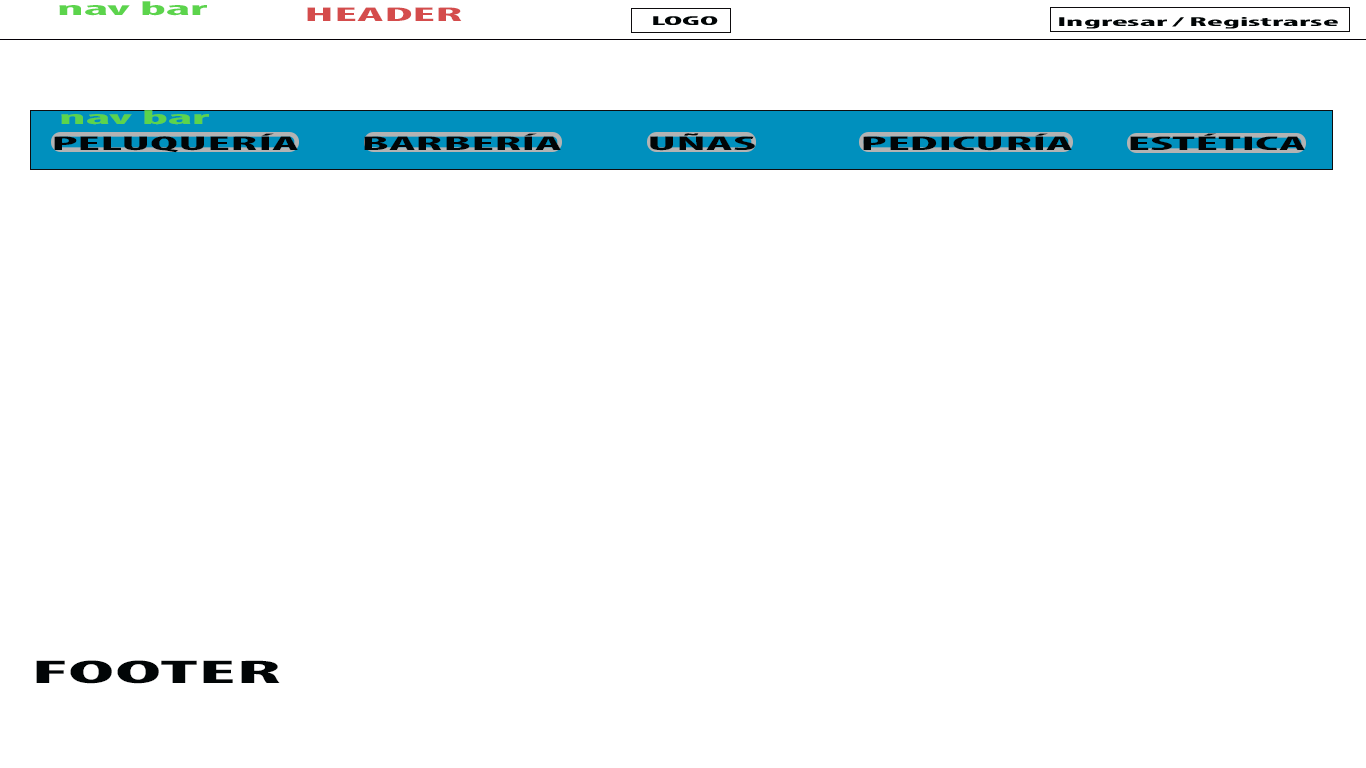
<style>
.page{position:relative;width:1366px;height:768px;background:#ffffff}
.page>*{position:absolute;margin:0}
.t1{font:20px "MyriadPro-BoldCond";color:#5cd44c;scale:2.91 1}
.t2{font:20px "MyriadPro-BoldCond";color:#d44c4c;scale:2.91 1}
.t3{font:20px "MyriadPro-BoldCond";color:#010506;scale:2.91 1}
.t4{font:33px "MyriadPro-BoldCond";color:#010506;scale:2.91 1}
</style>
<div class="page">
<p class="t1" style="left:59px;top:1px;width:148px;height:15px">nav bar</p>
<p class="t2" style="left:307px;top:7px;width:155px;height:14px">HEADER</p>
<p class="t1" style="left:61px;top:110px;width:148px;height:15px">nav bar</p>
<p class="t3" style="left:54px;top:133px;width:244px;height:20px">PELUQUERÍA</p>
<p class="t3" style="left:364px;top:133px;width:197px;height:17px">BARBERÍA</p>
<p class="t3" style="left:650px;top:133px;width:105px;height:18px">UÑAS</p>
<p class="t3" style="left:863px;top:133px;width:209px;height:18px">PEDICURÍA</p>
<p class="t3" style="left:1130px;top:133px;width:175px;height:17px">ESTÉTICA</p>
<p class="t4" style="left:36px;top:660px;width:244px;height:24px">FOOTER</p>
</div>
